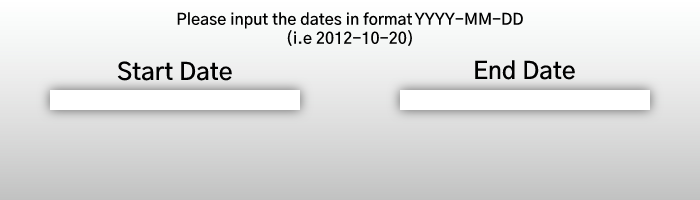
<style>
.page{position:relative;width:700px;height:200px}
.page>*{position:absolute;margin:0}
.t1{font:15.8px "GothicA1-SemiBold";color:#000000}
.t2{font:24px "GothicA1-SemiBold";color:#000000}
</style>
<div class="page">
<p class="t1" style="left:177px;top:12px;width:346px;height:35px;text-align:center">Please input the dates in format YYYY-MM-DD<br>(i.e 2012-10-20)</p>
<p class="t2" style="left:117px;top:61px;width:115px;height:20px">Start Date</p>
<p class="t2" style="left:475px;top:60px;width:100px;height:20px">End Date</p>
</div>
